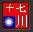
<style>
.page{position:relative;width:33px;height:32px;background:#f20000}
.page>*{position:absolute;margin:0}
.t1{font:10.4px "SimSun";color:#ffffff}
.t2{font:11.7px "SimSun";color:#ffffff}
</style>
<div class="page">
<p class="t1" style="left:6px;top:4px;width:20px;height:8px">十七</p>
<p class="t2" style="left:16px;top:15px;width:11px;height:12px">川</p>
</div>
